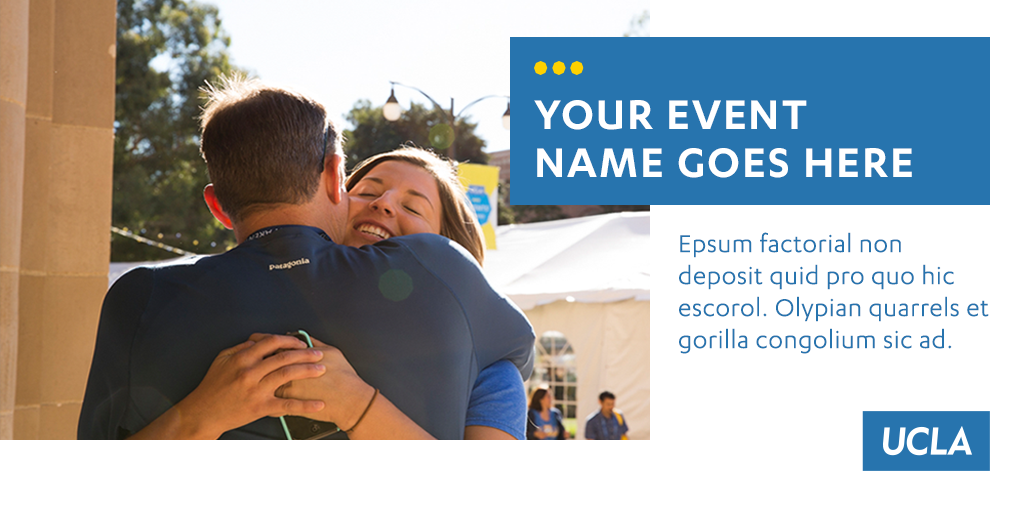
<style>
.page{position:relative;width:1024px;height:512px;background:#ffffff}
.page>*{position:absolute;margin:0}
.t1{font:48px "Karbon-Semibold";letter-spacing:0.04em;color:#ffffff;text-transform:uppercase}
.t2{font:28px/32px "Karbon-Regular";letter-spacing:0.02em;color:#2774ae}
</style>
<div class="page">
<p class="t1" style="left:534px;top:100px;width:378px;height:78px">Your Event Name Goes here</p>
<p class="t2" style="left:679px;top:232px;width:310px;height:122px">Epsum factorial non deposit quid pro quo hic escorol. Olypian quarrels et gorilla congolium sic ad.</p>
</div>
